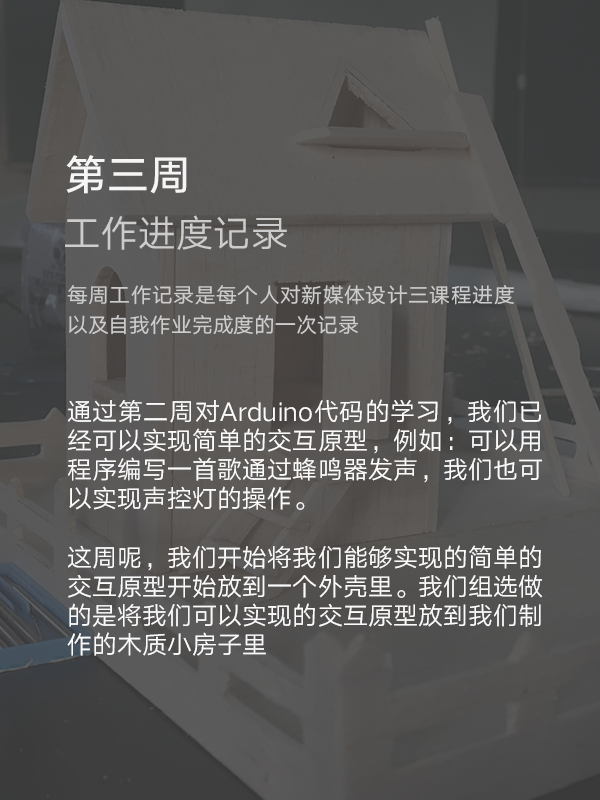
<style>
.page{position:relative;width:600px;height:800px}
.page>*{position:absolute;margin:0}
.t1{font:41.7px "HYQiHei-FZS";color:#f6f5f5}
.t2{font:37.5px "HYQiHei-EZS";color:#cdcccc}
.t3{font:20.8px/29.2px "HYQiHei-EZS";color:#cdcccc}
.t4{font:25px/29.2px "HYQiHei-EZS";color:#fcfbfb}
</style>
<div class="page">
<p class="t1" style="left:66px;top:155px;width:121px;height:39px">第三周</p>
<p class="t2" style="left:65px;top:215px;width:222px;height:35px">工作进度记录</p>
<p class="t3" style="left:67px;top:285px;width:447px;height:50px;text-align:justify">每周工作记录是每个人对新媒体设计三课程进度以及自我作业完成度的一次记录</p>
<p class="t4" style="left:67px;top:399px;width:476px;height:257px;text-align:justify">通过第二周对Arduino代码的学习，我们已经可以实现简单的交互原型，例如：可以用程序编写一首歌通过蜂鸣器发声，我们也可以实现声控灯的操作。<br><br>这周呢，我们开始将我们能够实现的简单的交互原型开始放到一个外壳里。我们组选做的是将我们可以实现的交互原型放到我们制作的木质小房子里</p>
</div>
